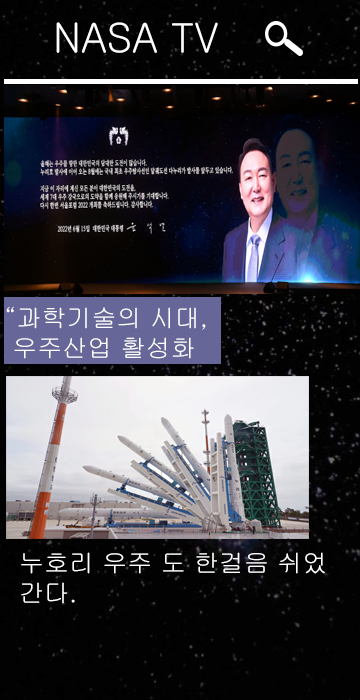
<style>
.page{position:relative;width:360px;height:700px;background:#020202}
.page>*{position:absolute;margin:0}
.t1{font:40px "Gulim";color:#ffffff}
.t2{font:25px "Gulim";color:#ffffff}
</style>
<div class="page">
<p class="t1" style="left:56px;top:22px;width:162px;height:31px">NASA TV</p>
<p class="t2" style="left:6px;top:306px;width:200px;height:53px">“과학기술의 시대, <br> 우주산업 활성화</p>
<p class="t2" style="left:21px;top:552px;width:304px;height:52px">누호리 우주 도 한걸음 쉬었<br>간다.</p>
</div>
